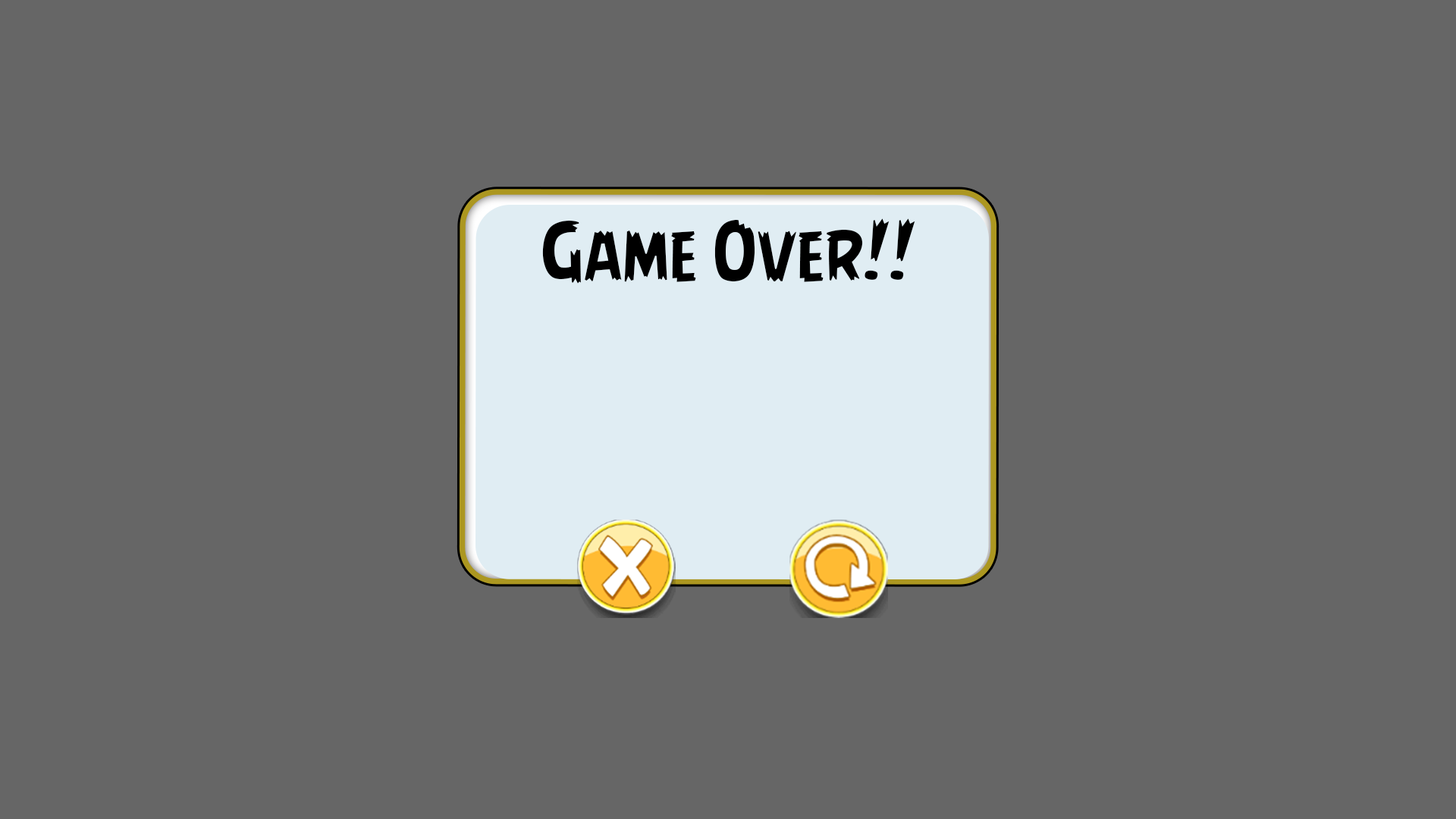
<style>
.page{position:relative;width:1456px;height:819px;background:#666666}
.page>*{position:absolute;margin:0}
.t1{font:76.6px "AngryBirds-Regular";color:#000000}
</style>
<div class="page">
<p class="t1" style="left:542px;top:218px;width:373px;height:66px">Game Over!!</p>
</div>
